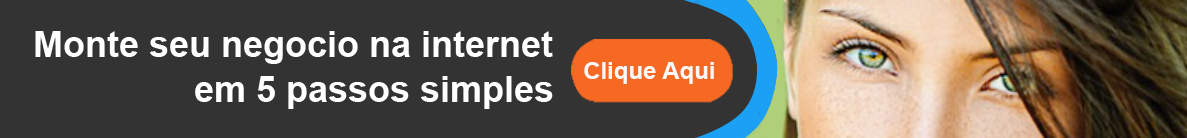
<style>
.page{position:relative;width:1187px;height:138px;background:#333333}
.page>*{position:absolute;margin:0}
.t1{font:36px "Arial-BoldMT";color:#ffffff}
.t2{font:24px "Arial-BoldMT";color:#fcf8f6}
</style>
<div class="page">
<p class="t1" style="left:35px;top:31px;width:518px;height:33px">Monte seu negocio na internet</p>
<p class="t2" style="left:584px;top:62px;width:130px;height:22px">Clique Aqui</p>
<p class="t1" style="left:195px;top:76px;width:358px;height:33px">em 5 passos simples</p>
</div>
